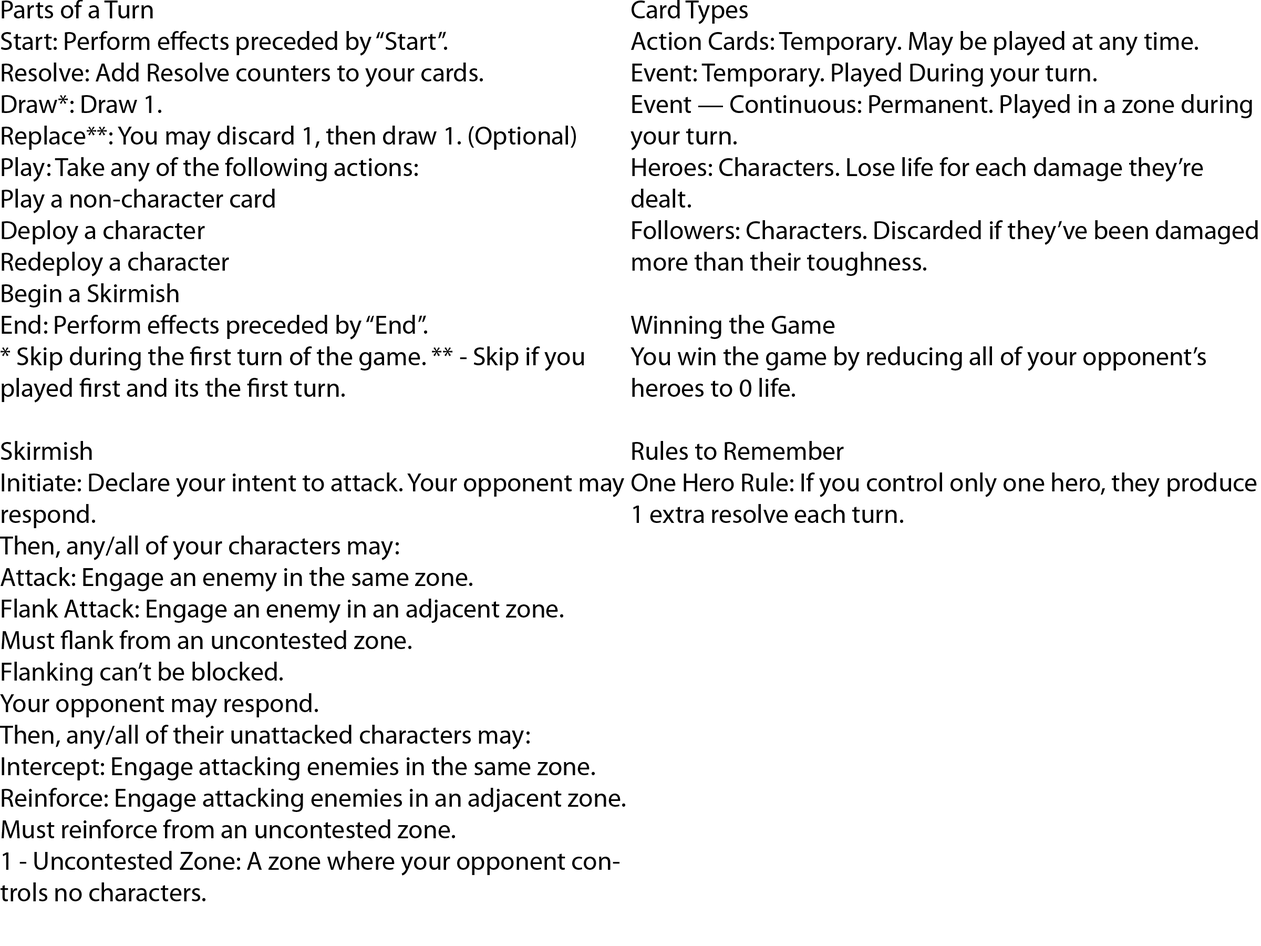
<style>
.page{position:relative;width:1261px;height:946px;background:#ffffff}
.page>*{position:absolute;margin:0}
.t1{font:26.3px "MyriadPro-Regular";color:#000000}
</style>
<div class="page">
<p class="t1" style="left:0px;top:0px;width:625px;height:901px">Parts of a Turn<br>Start: Perform effects preceded by “Start”.<br>Resolve: Add Resolve counters to your cards.<br>Draw*: Draw 1.<br>Replace**: You may discard 1, then draw 1. (Optional)<br>Play: Take any of the following actions:<br>Play a non-character card<br>Deploy a character<br>Redeploy a character<br>Begin a Skirmish<br>End: Perform effects preceded by “End”.<br>* Skip during the first turn of the game. ** - Skip if you played first and its the first turn.<br><br>Skirmish<br>Initiate: Declare your intent to attack. Your opponent may respond.<br>Then, any/all of your characters may:<br>Attack: Engage an enemy in the same zone.<br>Flank Attack: Engage an enemy in an adjacent zone.<br>Must flank from an uncontested zone.<br>Flanking can’t be blocked.<br>Your opponent may respond.<br>Then, any/all of their unattacked characters may:<br>Intercept: Engage attacking enemies in the same zone.<br>Reinforce: Engage attacking enemies in an adjacent zone.<br>Must reinforce from an uncontested zone.<br>1 - Uncontested Zone: A zone where your opponent controls no characters.</p>
<p class="t1" style="left:630px;top:0px;width:628px;height:523px">Card Types<br>Action Cards: Temporary. May be played at any time.<br>Event: Temporary. Played During your turn.<br>Event — Continuous: Permanent. Played in a zone during your turn.<br>Heroes: Characters. Lose life for each damage they’re dealt.<br>Followers: Characters. Discarded if they’ve been damaged more than their toughness.<br><br>Winning the Game<br>You win the game by reducing all of your opponent’s heroes to 0 life.<br><br>Rules to Remember<br>One Hero Rule: If you control only one hero, they produce 1 extra resolve each turn.</p>
</div>
